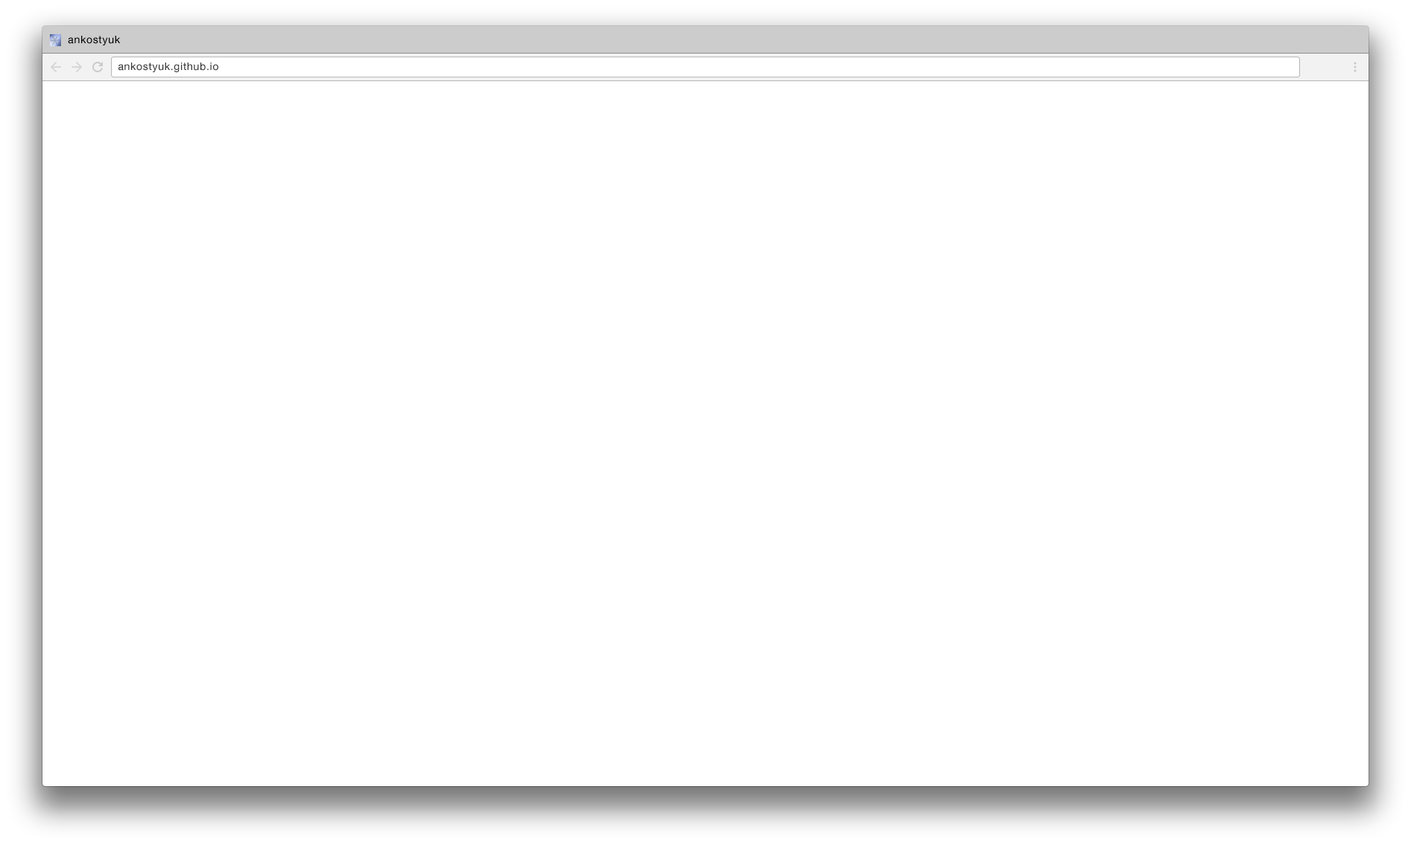
<style>
.page{position:relative;width:1411px;height:845px;background:#ffffff}
.page>*{position:absolute;margin:0}
.t1{font:10.4px "HelveticaNeue";letter-spacing:0.05em;color:#000000}
.t2{font:10.4px "HelveticaNeue";letter-spacing:0.05em;color:#333333}
</style>
<div class="page">
<p class="t1" style="left:68px;top:36px;width:52px;height:9px">ankostyuk</p>
<p class="t2" style="left:118px;top:63px;width:100px;height:9px">ankostyuk.github.io</p>
</div>
